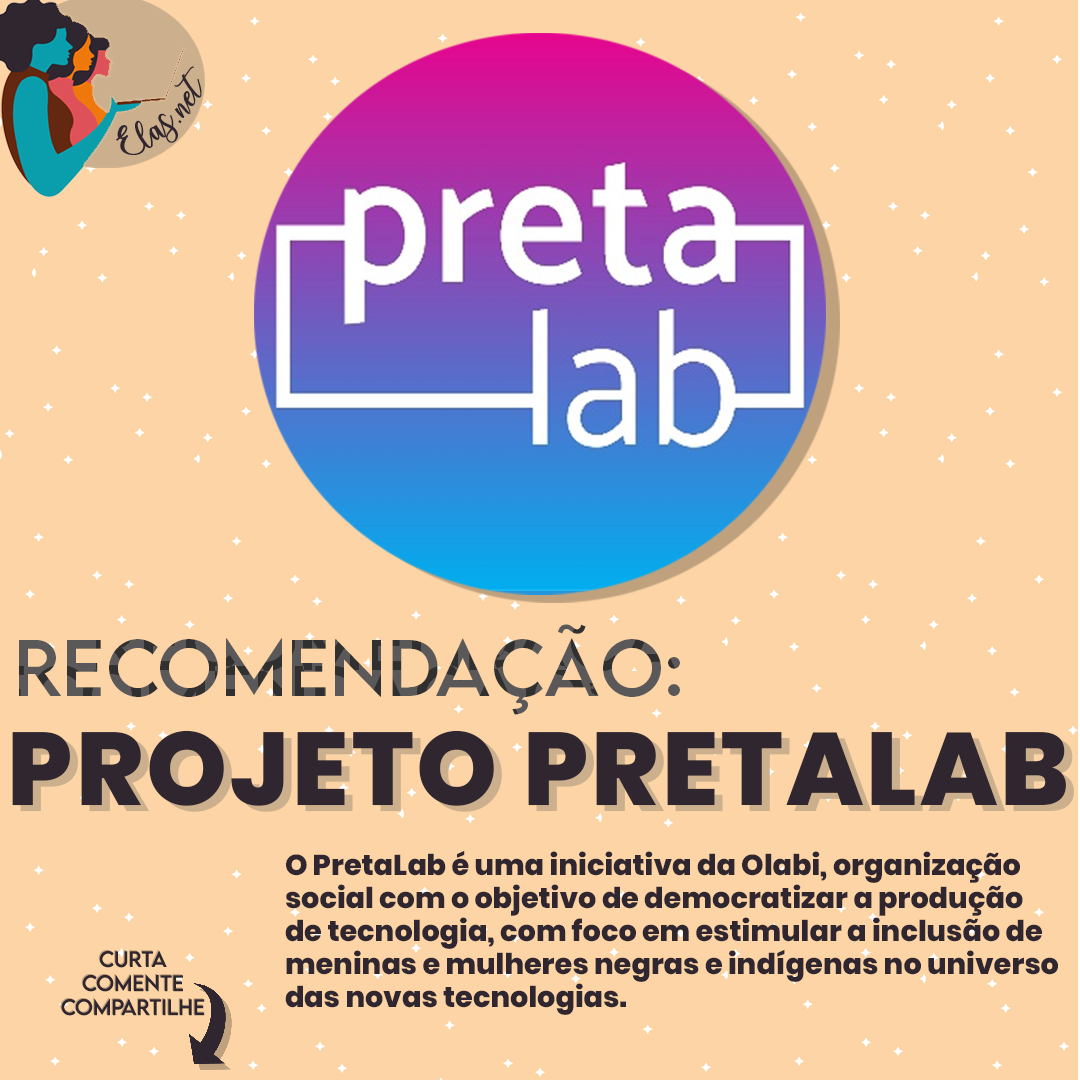
<style>
.page{position:relative;width:1080px;height:1080px;background:#fcd4a5}
.page>*{position:absolute;margin:0}
.t1{font:25px "charlinda-Regular";color:#2f262f;scale:1.18 1}
.t2{font:71.7px "LEMONMILK-Regular";letter-spacing:0.005em}
.t3{font:103px "Poppins-ExtraBold";letter-spacing:0.03em;color:#2f262f}
.t4{font:103px "Poppins-ExtraBold";letter-spacing:0.03em}
.t5{font:28.7px/33.2px "Poppins-ExtraBold";color:#2f262f}
.t6{font:20px "LEMONMILK-Regular"}
.t7{font:20px "LEMONMILK-Regular";color:#2f262f}
</style>
<div class="page">
<p class="t1" style="left:116px;top:66px;width:86px;height:89px;rotate:-43deg">Elas.net</p>
<p class="t2" style="left:19px;top:624px;width:661px;height:91px">Recomendação:</p>
<p class="t3" style="left:12px;top:730px;width:1054px;height:76px">PROJETO PRETALAB</p>
<p class="t4" style="left:20px;top:736px;width:1054px;height:76px">PROJETO PRETALAB</p>
<p class="t5" style="left:285px;top:850px;width:773px;height:165px">O PretaLab é uma iniciativa da Olabi, organização <br>social com o objetivo de democratizar a produção <br>de tecnologia, com foco em estimular a inclusão de <br>meninas e mulheres negras e indígenas no universo <br>das novas tecnologias.</p>
<p class="t6" style="left:60px;top:949px;width:144px;height:66px;text-align:center">Curta<br>Comente<br>Compartilhe</p>
<p class="t7" style="left:61px;top:950px;width:144px;height:66px;text-align:center">Curta<br>Comente<br>Compartilhe</p>
</div>
